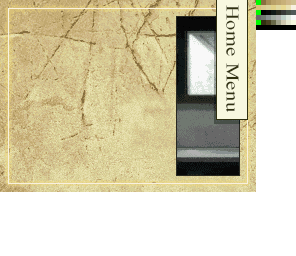
<style>
.page{position:relative;width:296px;height:256px;background:#ffffff}
.page>*{position:absolute;margin:0}
.t1{font:18px "TimesNewRomanPSMT";letter-spacing:0.025em;color:#303010;scale:1.14 1}
</style>
<div class="page">
<p class="t1" style="left:226px;top:5px;width:13px;height:107px;rotate:90deg">Home Menu</p>
</div>
